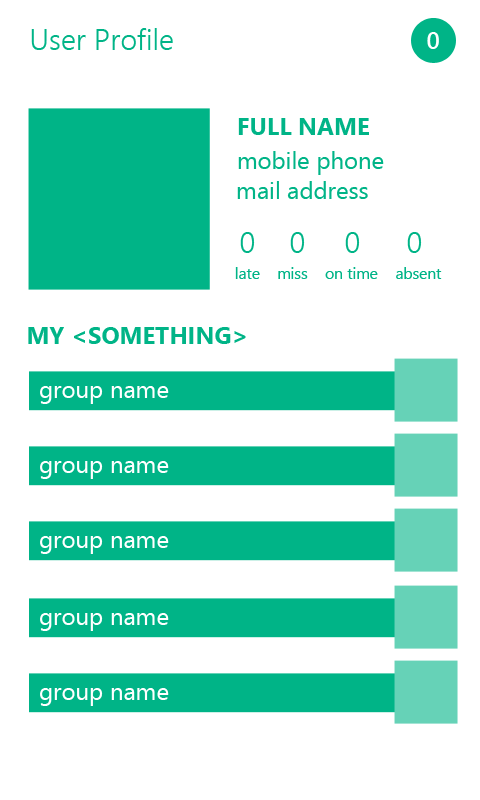
<style>
.page{position:relative;width:480px;height:800px;background:#ffffff}
.page>*{position:absolute;margin:0}
.t1{font:29.4px "SegoeUI-Semilight";color:#00b487}
.t2{font:24px "SegoeUI-Semibold";color:#ffffff}
.t3{font:24px "SegoeUI-Bold";color:#00b487}
.t4{font:24px "SegoeUI";color:#00b487}
.t5{font:30px "SegoeUI-Semilight";color:#00b487}
.t6{font:15.5px "SegoeUI";color:#00b487}
.t7{font:24px "SegoeUI";color:#ffffff}
</style>
<div class="page">
<p class="t1" style="left:31px;top:28px;width:142px;height:22px">User Profile</p>
<p class="t2" style="left:427px;top:32px;width:12px;height:17px">0</p>
<p class="t3" style="left:238px;top:118px;width:131px;height:17px">FULL NAME</p>
<p class="t4" style="left:238px;top:151px;width:146px;height:24px">mobile phone</p>
<p class="t4" style="left:237px;top:181px;width:131px;height:18px">mail address</p>
<p class="t5" style="left:240px;top:232px;width:15px;height:21px">0</p>
<p class="t5" style="left:290px;top:232px;width:15px;height:21px">0</p>
<p class="t5" style="left:345px;top:232px;width:15px;height:21px">0</p>
<p class="t5" style="left:407px;top:232px;width:15px;height:21px">0</p>
<p class="t6" style="left:235px;top:267px;width:25px;height:12px">late</p>
<p class="t6" style="left:278px;top:267px;width:30px;height:12px">miss</p>
<p class="t6" style="left:325px;top:267px;width:53px;height:12px">on time</p>
<p class="t6" style="left:396px;top:267px;width:46px;height:12px">absent</p>
<p class="t3" style="left:28px;top:327px;width:218px;height:17px">MY &lt;SOMETHING&gt;</p>
<p class="t7" style="left:40px;top:386px;width:129px;height:18px">group name</p>
<p class="t7" style="left:40px;top:461px;width:129px;height:18px">group name</p>
<p class="t7" style="left:40px;top:536px;width:129px;height:18px">group name</p>
<p class="t7" style="left:40px;top:613px;width:129px;height:18px">group name</p>
<p class="t7" style="left:40px;top:688px;width:129px;height:18px">group name</p>
</div>
